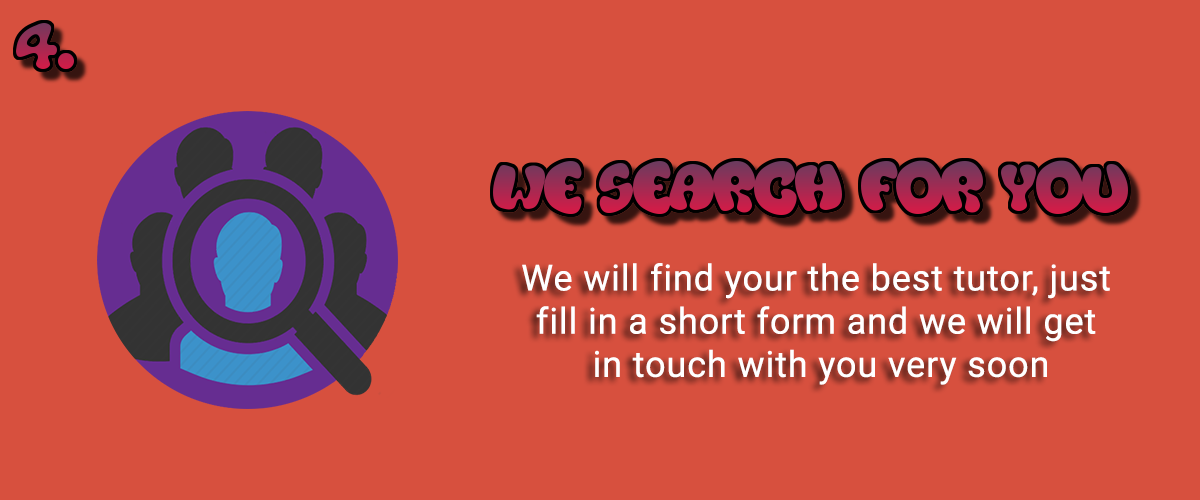
<style>
.page{position:relative;width:1200px;height:500px;background:#d7503e}
.page>*{position:absolute;margin:0}
.t1{font:36px "Roboto-Regular";letter-spacing:0.025em;color:#ffffff}
</style>
<div class="page">
<p class="t1" style="left:522px;top:263px;width:588px;height:122px;text-align:center">We will find your the best tutor, just <br>fill in a short form and we will get <br>in touch with you very soon</p>
</div>
